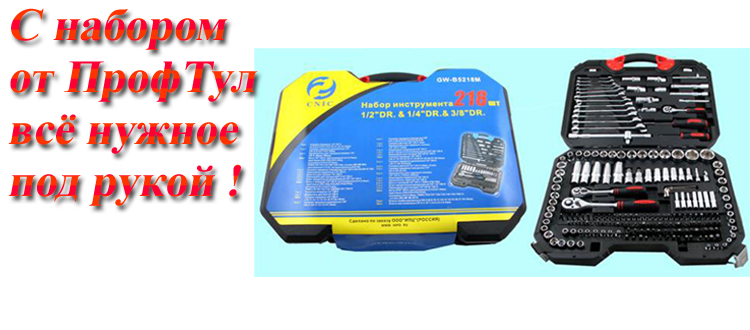
<style>
.page{position:relative;width:750px;height:330px;background:#ffffff}
.page>*{position:absolute;margin:0}
.t1{font:46px/52px "TimesNewRomanPS-BoldMT";font-style:italic}
</style>
<div class="page">
<p class="t1" style="left:8px;top:8px;width:250px;height:198px;text-align:justify">С набором<br>от ПрофТул <br>всё нужное<br>под рукой !</p>
</div>
